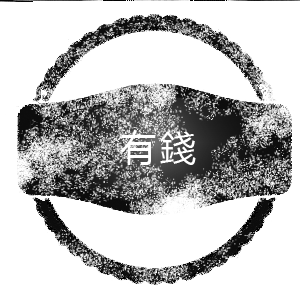
<style>
.page{position:relative;width:300px;height:300px;background:#ffffff}
.page>*{position:absolute;margin:0}
.t1{font:36px "MicrosoftYaHei";letter-spacing:0.1em;color:#ffffff}
</style>
<div class="page">
<p class="t1" style="left:120px;top:129px;width:76px;height:35px">有錢</p>
</div>
